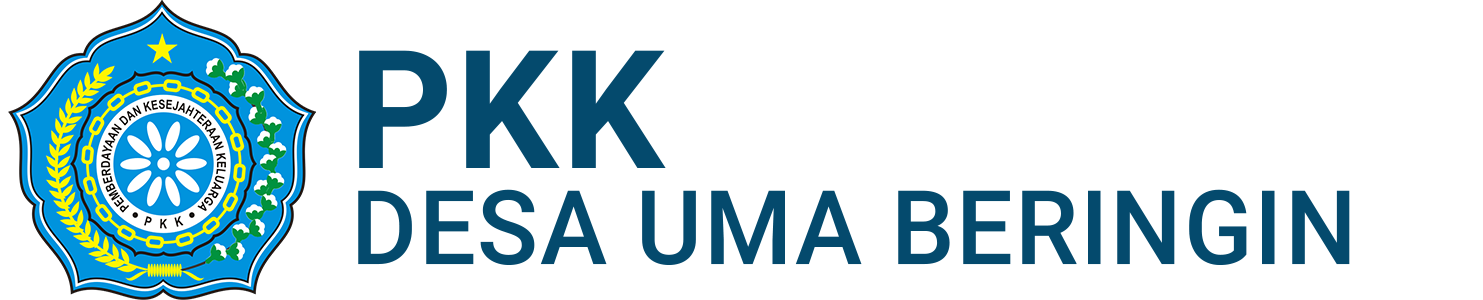
<style>
.page{position:relative;width:1483px;height:300px;background:#ffffff}
.page>*{position:absolute;margin:0}
.t1{font:164.9px "Roboto-Bold";letter-spacing:0.02em;color:#044a6d;text-transform:uppercase}
.t2{font:102.8px "Roboto-Medium";letter-spacing:0.02em;color:#044a6d;text-transform:uppercase}
</style>
<div class="page">
<p class="t1" style="left:359px;top:50px;width:307px;height:118px">PKK</p>
<p class="t2" style="left:358px;top:189px;width:992px;height:76px">desa uma beringin</p>
</div>
